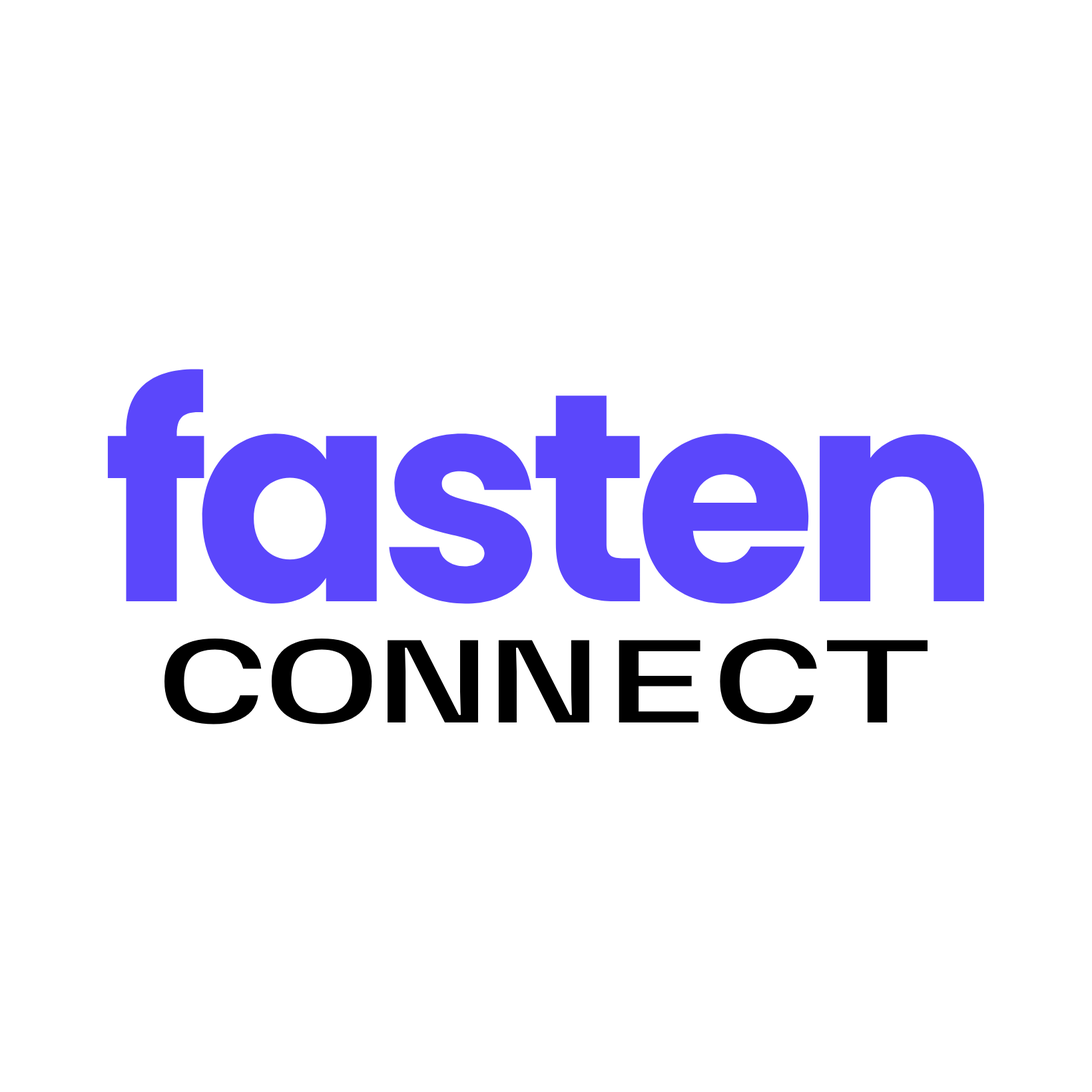
<style>
.page{position:relative;width:1092px;height:1092px;background:#ffffff}
.page>*{position:absolute;margin:0}
.t1{font:296.1px "Poppins-Bold";letter-spacing:-0.052em;color:#5b47fb}
.t2{font:102.9px "MartianMono-Regular";letter-spacing:-0.052em;color:#000000;text-transform:uppercase;scale:1.67 1}
</style>
<div class="page">
<p class="t1" style="left:107px;top:369px;width:877px;height:235px">fasten</p>
<p class="t2" style="left:164px;top:639px;width:764px;height:85px">CONNECT</p>
</div>
